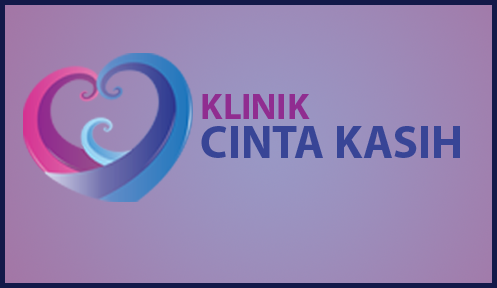
<style>
.page{position:relative;width:497px;height:288px}
.page>*{position:absolute;margin:0}
.t1{font:46px/39.8px "MyriadPro-Bold";color:#384596}
.t2{font:36.3px/39.8px "MyriadPro-Bold";color:#902d90}
</style>
<div class="page">
<p class="t1" style="left:201px;top:94px;width:259px;height:64px"><span class="t2">KLINIK<br></span>CINTA KASIH</p>
</div>
